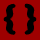
<style>
.page{position:relative;width:40px;height:40px;background:#9e0000}
.page>*{position:absolute;margin:0}
.t1{font:31.5px "Garamond-Bold";color:#000000;font-weight:bold}
</style>
<div class="page">
<p class="t1" style="left:4px;top:4px;width:32px;height:30px">{ }</p>
</div>
